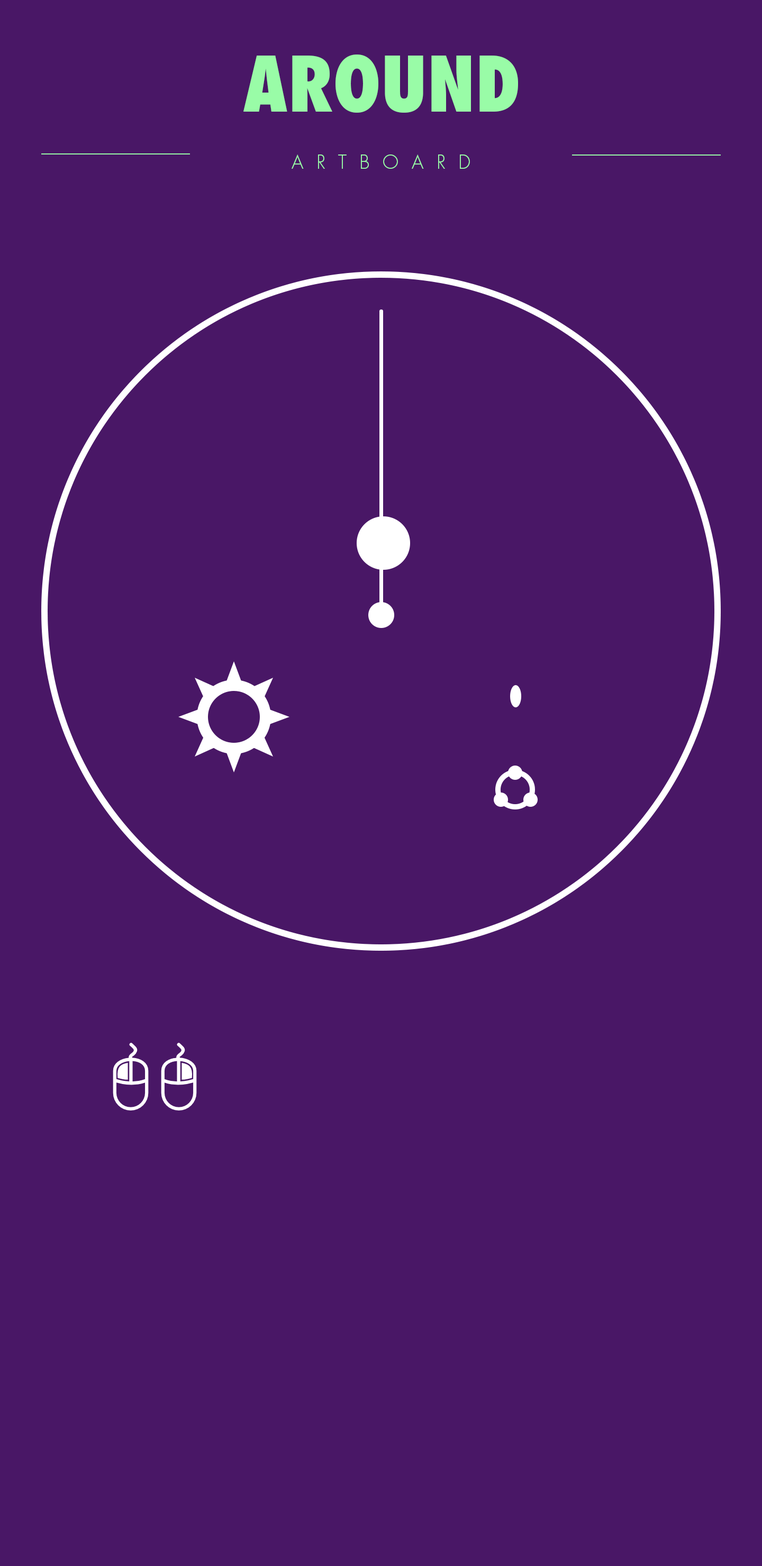
<style>
.page{position:relative;width:762px;height:1566px;background:#491766}
.page>*{position:absolute;margin:0}
.t1{font:74px "FuturaStd-CondensedExtraBd";color:#99fca7}
.t2{font:18.5px "FuturaStd-Light";letter-spacing:0.7em;color:#99fca7}
</style>
<div class="page">
<p class="t1" style="left:243px;top:54px;width:275px;height:59px">AROUND</p>
<p class="t2" style="left:291px;top:154px;width:179px;height:15px">ARTBOARD</p>
</div>
